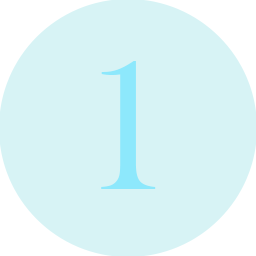
<style>
.page{position:relative;width:256px;height:256px;background:#d7f3f5}
.page>*{position:absolute;margin:0}
.t1{font:192px "BaskOldFace";color:#8de8fc}
</style>
<div class="page">
<p class="t1" style="left:101px;top:61px;width:55px;height:128px">1</p>
</div>
